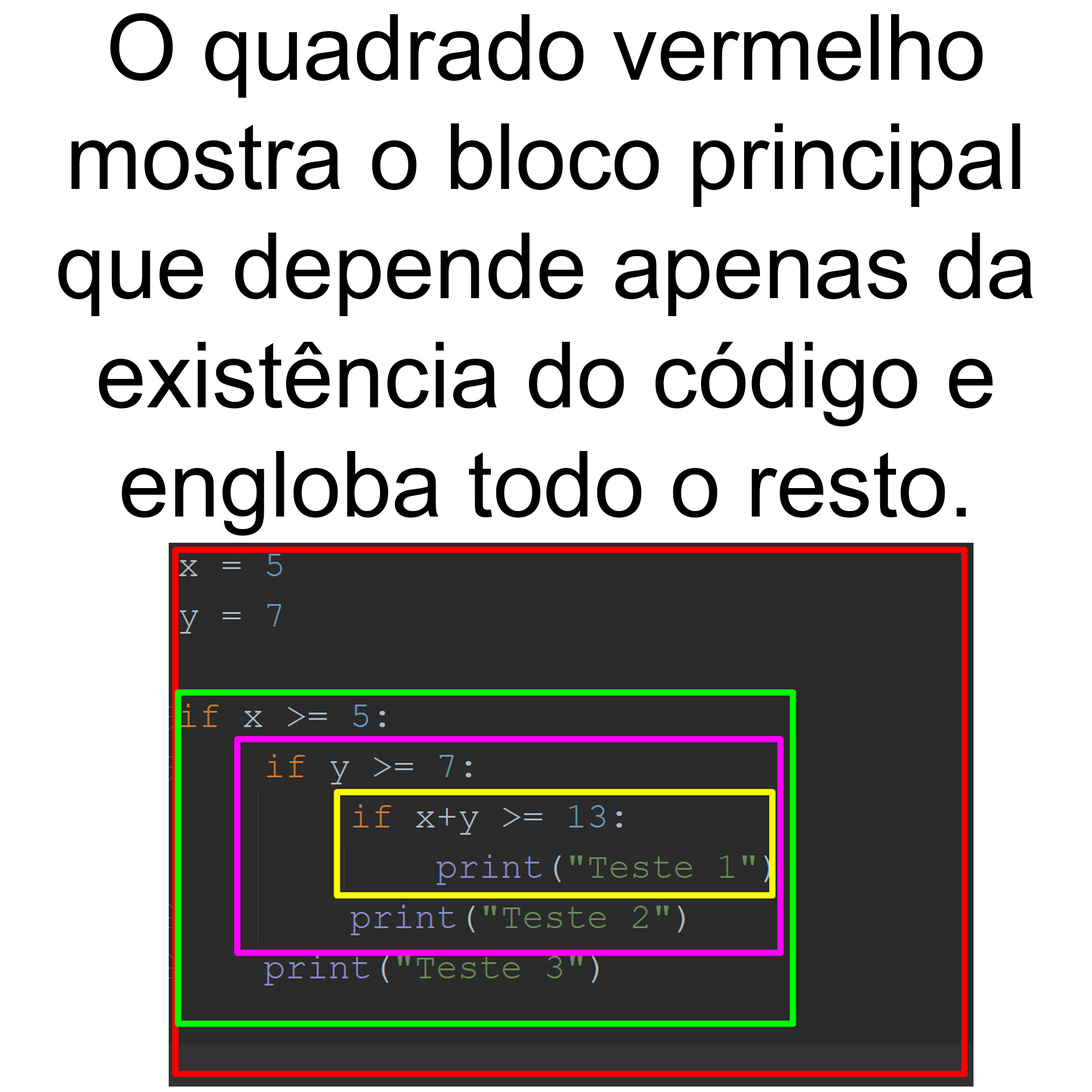
<style>
.page{position:relative;width:1092px;height:1092px;background:#ffffff}
.page>*{position:absolute;margin:0}
.t1{font:91px "ArialMT";color:#000000}
</style>
<div class="page">
<p class="t1" style="left:58px;top:13px;width:975px;height:523px;text-align:center">O quadrado vermelho<br>mostra o bloco principal<br>que depende apenas da<br>existência do código e<br>engloba todo o resto.</p>
</div>
